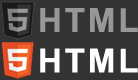
<style>
.page{position:relative;width:138px;height:80px;background:#333333}
.page>*{position:absolute;margin:0}
.t1{font:33.1px "Arial-BoldMT";letter-spacing:0.085em;color:#999898}
.t2{font:33.1px "Arial-BoldMT";letter-spacing:0.085em;color:#fefcfc}
</style>
<div class="page">
<p class="t1" style="left:40px;top:8px;width:98px;height:24px">HTML</p>
<p class="t2" style="left:40px;top:48px;width:98px;height:25px">HTML</p>
</div>
